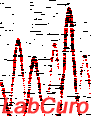
<style>
.page{position:relative;width:91px;height:116px;background:#ffffff}
.page>*{position:absolute;margin:0}
.t1{font:24px "Vrinda";color:#fd3333;font-weight:bold;font-style:italic}
</style>
<div class="page">
<p class="t1" style="left:2px;top:97px;width:87px;height:17px">LabCuro</p>
</div>
